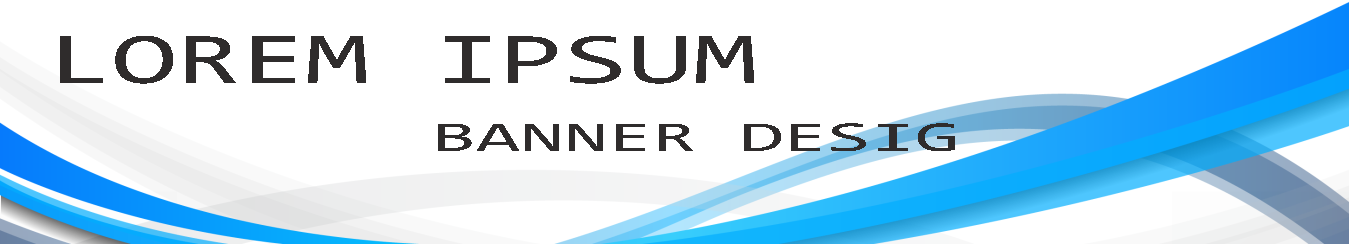
<style>
.page{position:relative;width:1349px;height:244px;background:#ffffff}
.page>*{position:absolute;margin:0}
.t1{font:73.3px "Consolas";color:#2f2c2c;scale:1.6 1}
.t2{font:43.1px "Consolas";color:#2f2c2c;scale:1.85 1}
</style>
<div class="page">
<p class="t1" style="left:60px;top:36px;width:694px;height:48px">LOREM IPSUM</p>
<p class="t2" style="left:438px;top:123px;width:517px;height:28px">BANNER DESIG</p>
</div>
